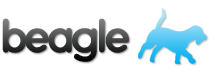
<style>
.page{position:relative;width:215px;height:73px;background:#ffffff}
.page>*{position:absolute;margin:0}
.t1{font:41.4px "HowiesFunhouse";letter-spacing:-0.16em;font-weight:bold}
</style>
<div class="page">
<p class="t1" style="left:2px;top:18px;width:127px;height:44px">beagle</p>
</div>
